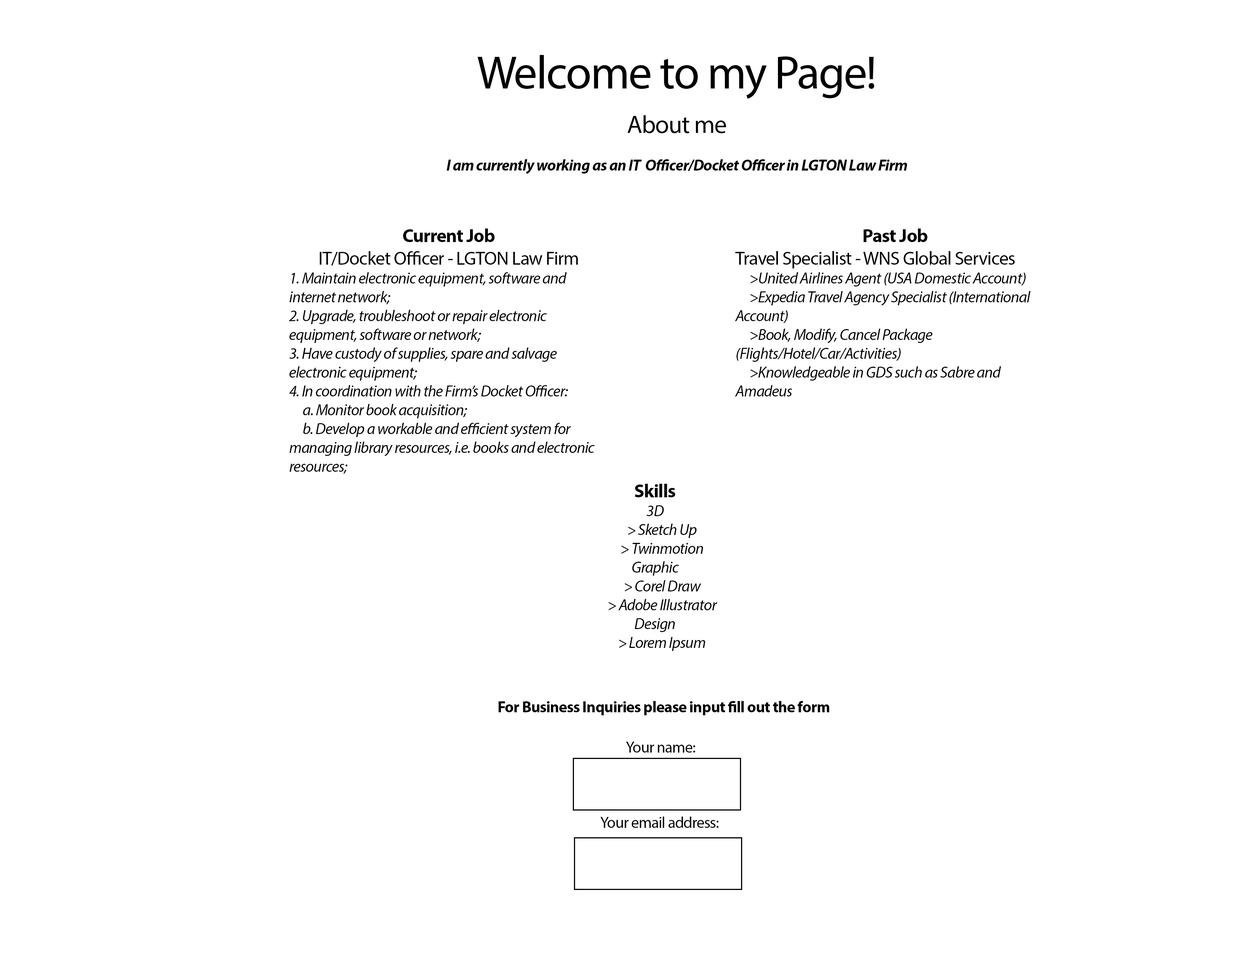
<style>
.page{position:relative;width:1242px;height:960px;background:#ffffff}
.page>*{position:absolute;margin:0}
.t1{font:47.1px "MyriadPro-Regular";letter-spacing:-0.025em;color:#000000}
.t2{font:25.1px "MyriadPro-Regular";letter-spacing:-0.025em;color:#000000}
.t3{font:15.7px "MyriadPro-BoldIt";letter-spacing:-0.025em;color:#000000}
.t4{font:15.7px "MyriadPro-It";letter-spacing:-0.025em;color:#000000}
.t5{font:18.8px "MyriadPro-Bold";letter-spacing:-0.025em;color:#000000}
.t6{font:18.8px "MyriadPro-Regular";letter-spacing:-0.025em;color:#000000}
.t7{font:15.7px "MyriadPro-Bold";letter-spacing:-0.025em;color:#000000}
.t8{font:15.7px "MyriadPro-Regular";letter-spacing:-0.025em;color:#000000}
</style>
<div class="page">
<p class="t1" style="left:478px;top:55px;width:396px;height:44px">Welcome to my Page!</p>
<p class="t2" style="left:628px;top:115px;width:98px;height:18px">About me</p>
<p class="t3" style="left:446px;top:159px;width:461px;height:15px">I am currently working as an IT  Officer/Docket Officer in LGTON Law Firm</p>
<p class="t4" style="left:289px;top:228px;width:306px;height:246px;text-align:center"><span class="t5">Current Job<br></span><span class="t6">IT/Docket Officer - LGTON Law Firm<br></span>1. Maintain electronic equipment, software and<br>internet network;<br>2. Upgrade, troubleshoot or repair electronic<br>equipment, software or network;<br>3. Have custody of supplies, spare and salvage<br>electronic equipment;<br>4. In coordination with the Firm’s Docket Officer:<br> a. Monitor book acquisition;<br> b. Develop a workable and efficient system for<br>managing library resources, i.e. books and electronic resources;</p>
<p class="t4" style="left:735px;top:228px;width:296px;height:168px;text-align:center"><span class="t5">Past Job<br></span><span class="t6">Travel Specialist - WNS Global Services<br></span> &gt;United Airlines Agent (USA Domestic Account)<br> &gt;Expedia Travel Agency Specialist (International Account)<br> &gt;Book, Modify, Cancel Package (Flights/Hotel/Car/Activities)<br> &gt;Knowledgeable in GDS such as Sabre and Amadeus</p>
<p class="t4" style="left:609px;top:484px;width:108px;height:167px;text-align:center"><span class="t5">Skills<br></span>3D<br> &gt; Sketch Up<br> &gt; Twinmotion<br>Graphic<br> &gt; Corel Draw<br> &gt; Adobe Illustrator<br>Design<br> &gt; Lorem Ipsum</p>
<p class="t7" style="left:498px;top:701px;width:332px;height:14px">For Business Inquiries please input fill out the form</p>
<p class="t8" style="left:600px;top:742px;width:119px;height:86px;text-align:center">Your name:<br><br><br><br>Your email address:</p>
</div>
